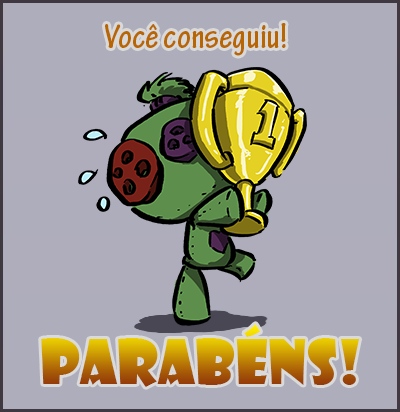
<style>
.page{position:relative;width:400px;height:412px;background:#aeadbb}
.page>*{position:absolute;margin:0}
.t1{font:36px "TektonPro-BoldCond";color:#b86503}
.t2{font:60px "ShowcardGothic-Reg"}
</style>
<div class="page">
<p class="t1" style="left:105px;top:23px;width:181px;height:33px">Você conseguiu!</p>
<p class="t2" style="left:41px;top:324px;width:319px;height:63px">PARABÉNS!</p>
</div>
